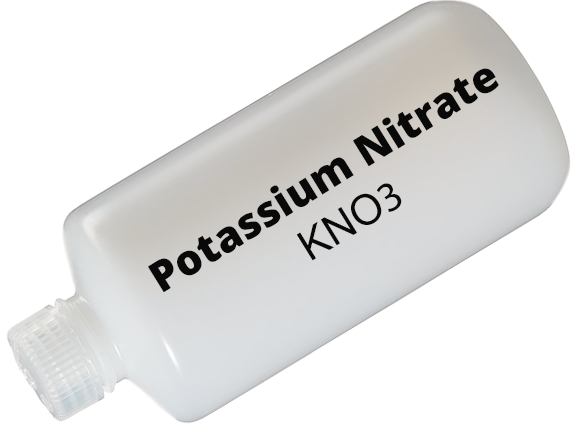
<style>
.page{position:relative;width:582px;height:434px;background:#ffffff}
.page>*{position:absolute;margin:0}
.t1{font:42.3px "OpenSans-Extrabold";color:#0b0b0b}
.t2{font:42.3px "ArialMT";color:#0b0b0b}
.t3{font:42.3px "MyriadPro-Regular";color:#0b0b0b}
</style>
<div class="page">
<p class="t1" style="left:148px;top:68px;width:351px;height:225px;text-align:center;rotate:-32deg">Potassium Nitrate<br><span class="t2">KNO</span><span class="t3">3</span></p>
</div>
